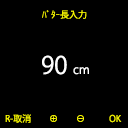
<style>
.page{position:relative;width:128px;height:128px;background:#000000}
.page>*{position:absolute;margin:0}
.t1{font:9px "KozGoPr6N-Regular";color:#ffff00}
.t2{font:24px "KozGoPr6N-Regular";color:#ffffff}
.t3{font:12px "KozGoPr6N-Regular";color:#ffffff}
</style>
<div class="page">
<p class="t1" style="left:42px;top:10px;width:45px;height:9px">ﾊﾟﾀｰ長入力</p>
<p class="t2" style="left:42px;top:55px;width:47px;height:20px">90 <span class="t3">cm</span></p>
<p class="t1" style="left:5px;top:114px;width:117px;height:9px">R-取消　　⊕　　⊖　 　  OK</p>
</div>
